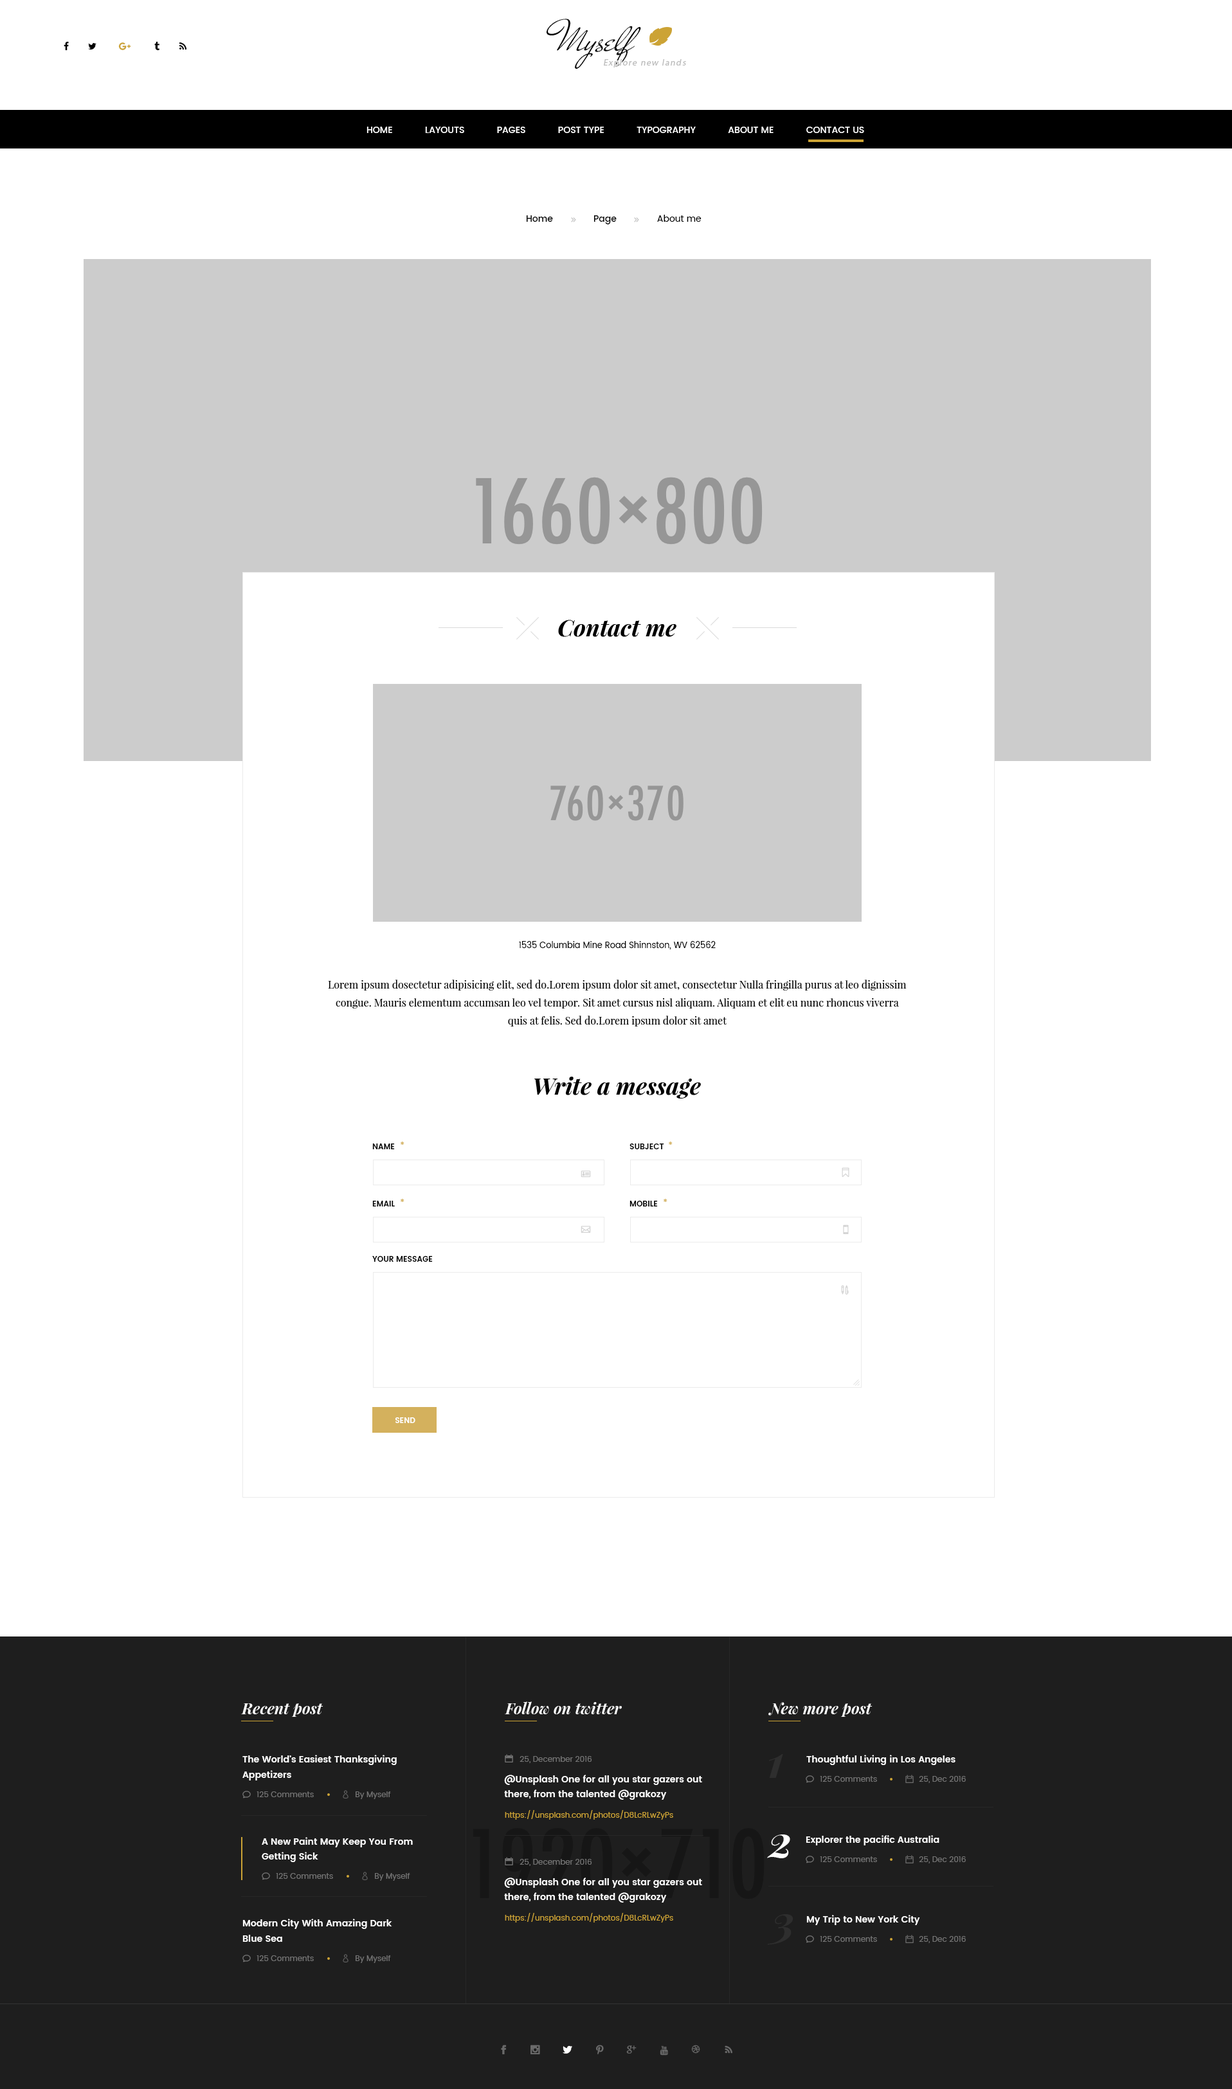
<style>
.page{position:relative;width:1232px;height:2089px;background:#ffffff}
.page>*{position:absolute;margin:0}
.t1{font:45px "MrDeHaviland-Regular";color:#000000}
.t2{font:9px "MyriadPro-Regular";letter-spacing:0.1em;color:#bbbbbb;font-style:italic}
.t3{font:9px "Poppins-Medium";color:#ffffff;text-transform:uppercase}
.t4{font:9px "Poppins-Medium";color:#000000}
.t5{font:9px "Poppins-Regular";color:#000000}
.t6{font:23.1px "PlayfairDisplay-BoldItalic";color:#000000}
.t7{font:8.4px "Poppins-Regular";color:#000000}
.t8{font:10.3px/18px "PlayfairDisplay-Regular";color:#000000}
.t9{font:7.7px "Poppins-SemiBold";color:#000000;text-transform:uppercase}
.t10{font:9px "Poppins-SemiBold";color:#d4b15d}
.t11{font:7.7px "Poppins-SemiBold";color:#ffffff;text-transform:uppercase}
.t12{font:15.4px "PlayfairDisplay-BoldItalic";color:#ffffff}
.t13{font:9px/15.4px "Poppins-SemiBold";color:#ffffff}
.t14{font:7.7px "Poppins-Regular";color:#747474}
.t15{font:45px "PlayfairDisplay-BoldItalic";color:#2e2e2e}
.t16{font:9px "Poppins-SemiBold";color:#ffffff}
.t17{font:9px/14.8px "Poppins-SemiBold";color:#ffffff}
.t18{font:7.7px "Poppins-Regular";color:#cca335}
.t19{font:45px "PlayfairDisplay-BoldItalic";color:#ffffff}
</style>
<div class="page">
<p class="t1" style="left:546px;top:19px;width:95px;height:50px">Myself</p>
<p class="t2" style="left:604px;top:59px;width:82px;height:9px">Explore new lands</p>
<p class="t3" style="left:366px;top:127px;width:498px;height:6px">Home            Layouts            Pages            Post type            Typography            About Me            Contact us</p>
<p class="t4" style="left:526px;top:215px;width:175px;height:9px">Home               Page              <span class="t5"> About me</span></p>
<p class="t6" style="left:558px;top:620px;width:118px;height:17px">Contact me</p>
<p class="t7" style="left:519px;top:941px;width:197px;height:9px">1535 Columbia Mine Road Shinnston, WV 62562</p>
<p class="t8" style="left:328px;top:980px;width:578px;height:47px;text-align:center">Lorem ipsum dosectetur adipisicing elit, sed do.Lorem ipsum dolor sit amet, consectetur Nulla fringilla purus at leo dignissim congue. Mauris elementum accumsan leo vel tempor. Sit amet cursus nisl aliquam. Aliquam et elit eu nunc rhoncus viverra quis at felis. Sed do.Lorem ipsum dolor sit amet</p>
<p class="t6" style="left:534px;top:1077px;width:167px;height:22px">Write a message</p>
<p class="t9" style="left:372px;top:1144px;width:23px;height:5px">Name</p>
<p class="t10" style="left:401px;top:1142px;width:3px;height:3px">*</p>
<p class="t9" style="left:629px;top:1144px;width:35px;height:5px">subject</p>
<p class="t10" style="left:669px;top:1142px;width:3px;height:3px">*</p>
<p class="t9" style="left:372px;top:1201px;width:23px;height:6px">Email</p>
<p class="t10" style="left:401px;top:1199px;width:3px;height:3px">*</p>
<p class="t9" style="left:629px;top:1201px;width:29px;height:6px">Mobile</p>
<p class="t10" style="left:663px;top:1199px;width:4px;height:3px">*</p>
<p class="t9" style="left:372px;top:1256px;width:61px;height:6px">Your message</p>
<p class="t11" style="left:395px;top:1418px;width:20px;height:5px">Send</p>
<p class="t12" style="left:241px;top:1704px;width:82px;height:13px">Recent post</p>
<p class="t12" style="left:505px;top:1702px;width:117px;height:13px">Follow on twitter</p>
<p class="t12" style="left:768px;top:1702px;width:104px;height:15px">New more post</p>
<p class="t13" style="left:242px;top:1755px;width:155px;height:26px">The World's Easiest Thanksgiving <br>Appetizers</p>
<p class="t14" style="left:519px;top:1756px;width:73px;height:7px">25, December 2016</p>
<p class="t15" style="left:769px;top:1754px;width:14px;height:24px">1</p>
<p class="t16" style="left:806px;top:1755px;width:149px;height:10px">Thoughtful Living in Los Angeles</p>
<p class="t17" style="left:504px;top:1775px;width:198px;height:25px">@Unsplash One for all you star gazers out <br>there, from the talented @grakozy</p>
<p class="t14" style="left:820px;top:1776px;width:57px;height:6px">125 Comments</p>
<p class="t14" style="left:919px;top:1776px;width:47px;height:7px">25, Dec 2016</p>
<p class="t14" style="left:257px;top:1792px;width:57px;height:6px">125 Comments</p>
<p class="t14" style="left:356px;top:1792px;width:35px;height:7px">By Myself</p>
<p class="t18" style="left:505px;top:1810px;width:168px;height:10px">https://unsplash.com/photos/D8LcRLwZyPs</p>
<p class="t17" style="left:262px;top:1837px;width:151px;height:25px">A New Paint May Keep You From<br>Getting Sick</p>
<p class="t19" style="left:767px;top:1835px;width:23px;height:24px">2</p>
<p class="t16" style="left:806px;top:1835px;width:133px;height:11px">Explorer the pacific Australia</p>
<p class="t14" style="left:519px;top:1859px;width:73px;height:7px">25, December 2016</p>
<p class="t14" style="left:820px;top:1857px;width:57px;height:5px">125 Comments</p>
<p class="t14" style="left:919px;top:1857px;width:47px;height:7px">25, Dec 2016</p>
<p class="t14" style="left:276px;top:1873px;width:57px;height:6px">125 Comments</p>
<p class="t14" style="left:375px;top:1873px;width:35px;height:8px">By Myself</p>
<p class="t17" style="left:504px;top:1878px;width:198px;height:25px">@Unsplash One for all you star gazers out <br>there, from the talented @grakozy</p>
<p class="t18" style="left:505px;top:1913px;width:168px;height:10px">https://unsplash.com/photos/D8LcRLwZyPs</p>
<p class="t13" style="left:242px;top:1919px;width:150px;height:23px">Modern City With Amazing Dark <br>Blue Sea</p>
<p class="t15" style="left:767px;top:1915px;width:26px;height:30px">3</p>
<p class="t16" style="left:806px;top:1915px;width:114px;height:10px">My Trip to New York City</p>
<p class="t14" style="left:820px;top:1936px;width:57px;height:6px">125 Comments</p>
<p class="t14" style="left:919px;top:1936px;width:47px;height:7px">25, Dec 2016</p>
<p class="t14" style="left:257px;top:1956px;width:57px;height:5px">125 Comments</p>
<p class="t14" style="left:356px;top:1956px;width:35px;height:7px">By Myself</p>
</div>
